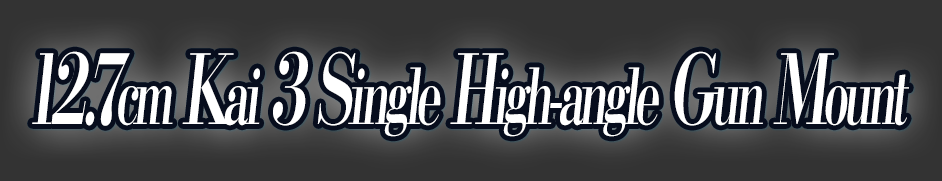
<style>
.page{position:relative;width:942px;height:181px;background:#333333}
.page>*{position:absolute;margin:0}
.t1{font:76.8px "KochoStd-Heavy";letter-spacing:-0.1em;color:#ffffff;font-style:italic;scale:0.61 1}
.t2{font:96px "KochoStd-Heavy";letter-spacing:-0.1em;color:#ffffff;font-style:italic;scale:0.61 1}
</style>
<div class="page">
<p class="t1" style="left:32px;top:51px;width:877px;height:86px"><span class="t2">12.7</span>cm<span class="t2"> K</span>ai<span class="t2"> 3 S</span>ingle<span class="t2"> H</span>igh-angle<span class="t2"> G</span>un<span class="t2"> M</span>ount</p>
</div>
